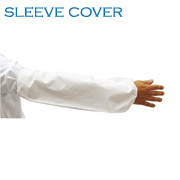
<style>
.page{position:relative;width:180px;height:180px;background:#ffffff}
.page>*{position:absolute;margin:0}
.t1{font:16.7px "CopperplateGothic-Light";color:#1173b2}
.t2{font:33.3px "CopperplateGothic-Light";color:#1389d4}
.t3{font:58.3px "CopperplateGothic-Light";color:#1389d4}
</style>
<div class="page">
<p class="t1" style="left:4px;top:7px;width:119px;height:11px">sleeve cover <span class="t2">cover</span><span class="t3">ve</span></p>
</div>
